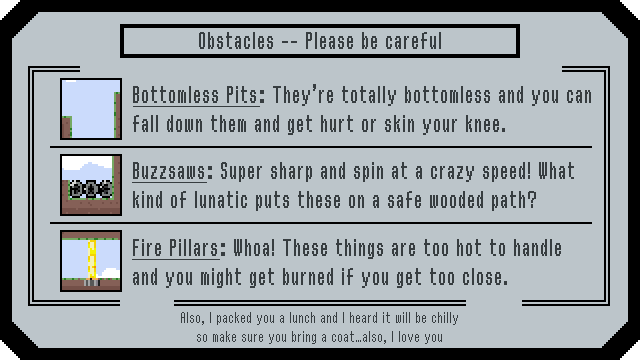
<style>
.page{position:relative;width:640px;height:360px;background:#bcc5ca}
.page>*{position:absolute;margin:0}
.t1{font:24px "ReturnOfGanonReg";color:#373d40}
.t2{font:24px "ReturnOfGanonReg";color:#373d40;text-decoration:underline}
.t3{font:16px "ReturnOfGanonReg";color:#373d40}
</style>
<div class="page">
<p class="t1" style="left:199px;top:32px;width:242px;height:17px">Obstacles -- Please be careful</p>
<p class="t1" style="left:133px;top:84px;width:458px;height:51px"><span class="t2">Bottomless Pits</span>: They’re totally bottomless and you can<br>fall down them and get hurt or skin your knee.</p>
<p class="t1" style="left:132px;top:162px;width:442px;height:49px"><span class="t2">Buzzsaws</span>: Super sharp and spin at a crazy speed! What<br>kind of lunatic puts these on a safe wooded path?</p>
<p class="t1" style="left:132px;top:239px;width:429px;height:49px"><span class="t2">Fire Pillars</span>: Whoa! These things are too hot to handle<br>and you might get burned if you get too close.</p>
<p class="t3" style="left:181px;top:312px;width:277px;height:32px;text-align:center">Also, I packed you a lunch and I heard it will be chilly<br>so make sure you bring a coat...also, I love you</p>
</div>
